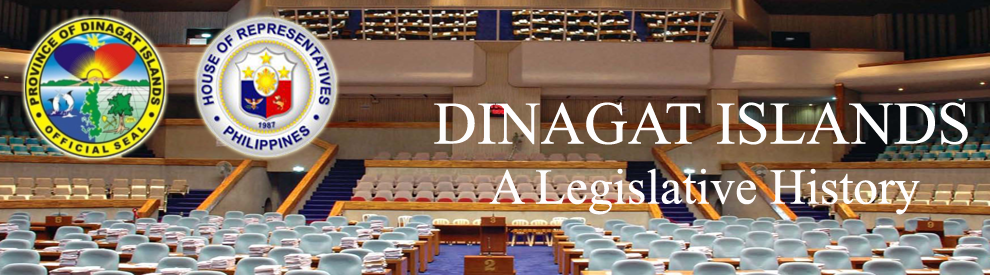
<style>
.page{position:relative;width:990px;height:275px}
.page>*{position:absolute;margin:0}
.t1{font:50px "TimesNewRomanPSMT";color:#fdfcfc}
.t2{font:60.4px "TimesNewRomanPSMT";color:#fdfdfd}
</style>
<div class="page">
<p class="t1" style="left:434px;top:102px;width:534px;height:113px;text-align:center"><span class="t2">DINAGAT ISLANDS<br></span>A Legislative History</p>
</div>
